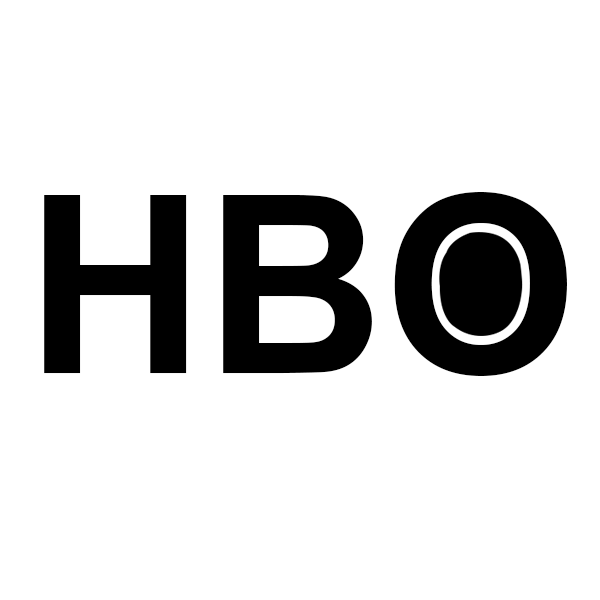
<style>
.page{position:relative;width:600px;height:600px;background:#ffffff}
.page>*{position:absolute;margin:0}
.t1{font:247.9px "Arial-BoldMT";color:#000000}
</style>
<div class="page">
<p class="t1" style="left:44px;top:192px;width:523px;height:184px">HBO</p>
</div>
